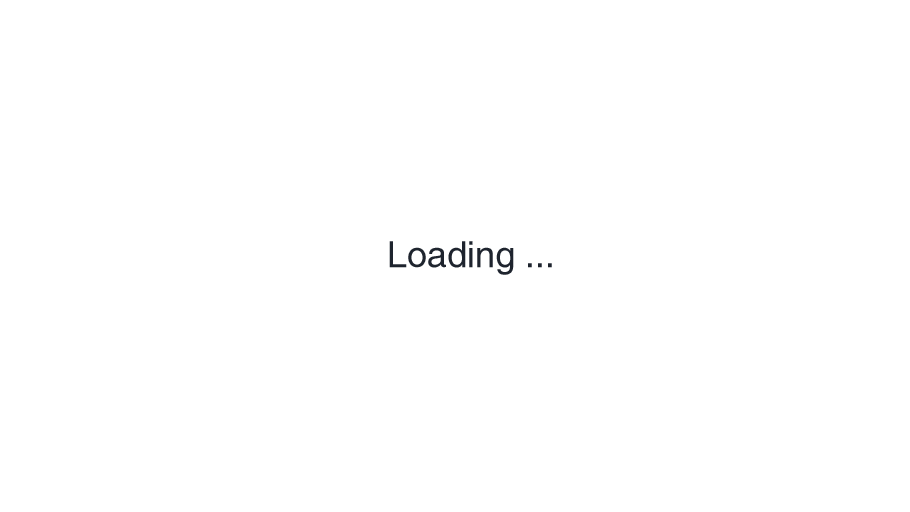
<style>
.page{position:relative;width:910px;height:512px;background:#ffffff}
.page>*{position:absolute;margin:0}
.t1{font:36px "Helvetica";color:#1e242e}
</style>
<div class="page">
<p class="t1" style="left:389px;top:241px;width:163px;height:34px">Loading ...</p>
</div>
